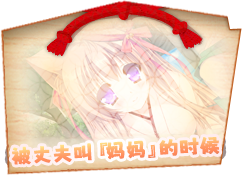
<style>
.page{position:relative;width:242px;height:175px}
.page>*{position:absolute;margin:0}
.t1{font:20px "MaokenAssortedSans";font-weight:bold}
.t2{font:20px "MaokenAssortedSans";letter-spacing:-0.2em;font-weight:bold}
</style>
<div class="page">
<p class="t1" style="left:11px;top:137px;width:209px;height:28px;rotate:-3deg">被丈夫叫<span class="t2">『</span>妈妈<span class="t2">』</span>的时候</p>
</div>
